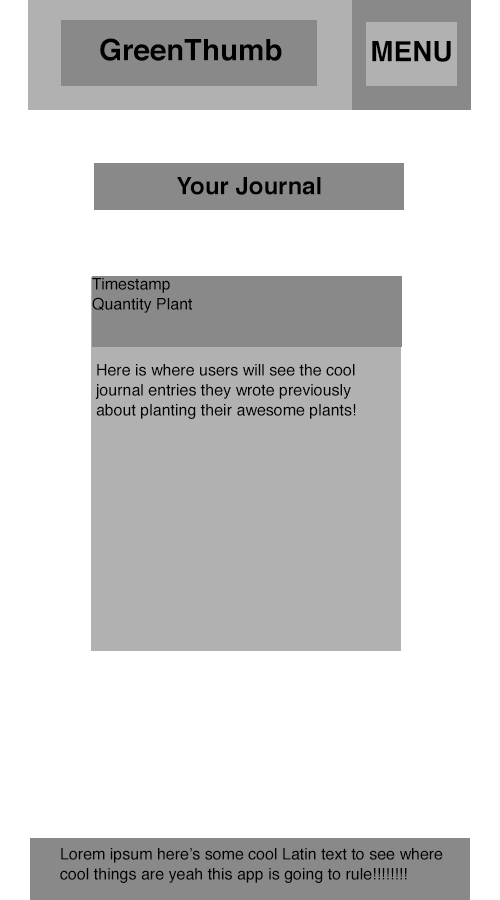
<style>
.page{position:relative;width:500px;height:900px;background:#ffffff}
.page>*{position:absolute;margin:0}
.t1{font:29.5px "Helvetica-Bold";color:#000000}
.t2{font:28px "Helvetica-Bold";color:#000000}
.t3{font:24px "Helvetica-Bold";color:#000000}
.t4{font:16px/20px "Helvetica";color:#000000}
</style>
<div class="page">
<p class="t1" style="left:100px;top:38px;width:182px;height:23px">GreenThumb</p>
<p class="t2" style="left:372px;top:41px;width:79px;height:21px">MENU</p>
<p class="t3" style="left:177px;top:177px;width:144px;height:18px">Your Journal</p>
<p class="t4" style="left:92px;top:278px;width:100px;height:35px">Timestamp<br>Quantity Plant</p>
<p class="t4" style="left:95px;top:364px;width:261px;height:55px">Here is where users will see the cool journal entries they wrote previously about planting their awesome plants!</p>
<p class="t4" style="left:60px;top:848px;width:383px;height:35px">Lorem ipsum here’s some cool Latin text to see where cool things are yeah this app is going to rule!!!!!!!!</p>
</div>
